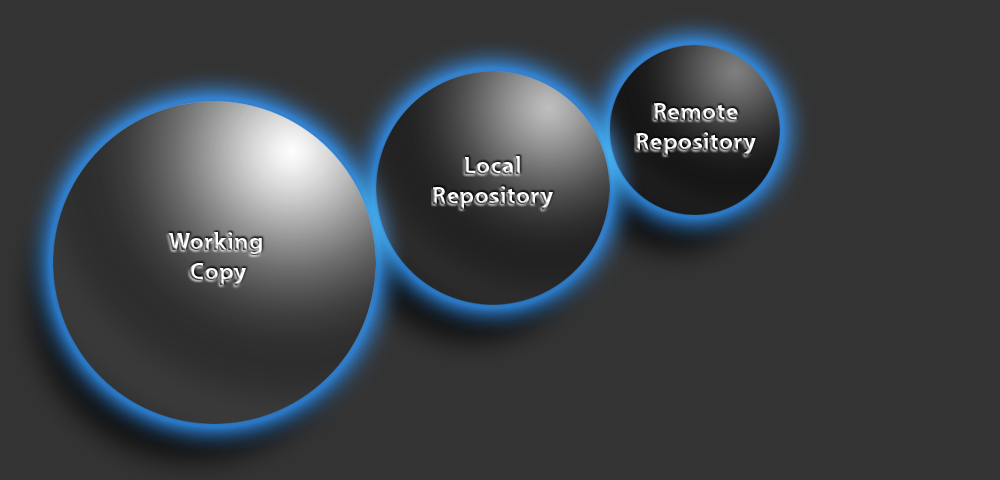
<style>
.page{position:relative;width:1000px;height:480px;background:#333333}
.page>*{position:absolute;margin:0}
.t1{font:25px "MyriadPro-Bold"}
</style>
<div class="page">
<p class="t1" style="left:636px;top:103px;width:120px;height:53px;text-align:center">Remote<br>Repository</p>
<p class="t1" style="left:433px;top:156px;width:120px;height:54px;text-align:center">Local<br>Repository</p>
<p class="t1" style="left:168px;top:232px;width:94px;height:54px;text-align:center">Working <br>Copy</p>
</div>
